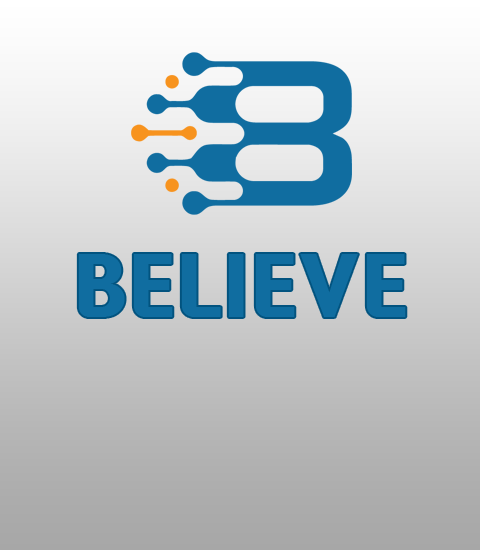
<style>
.page{position:relative;width:480px;height:550px}
.page>*{position:absolute;margin:0}
.t1{font:72px "HeadlineR-HM";color:#106da0}
</style>
<div class="page">
<p class="t1" style="left:78px;top:254px;width:328px;height:63px">BELIEVE</p>
</div>
